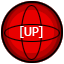
<style>
.page{position:relative;width:64px;height:64px;background:#ffffff}
.page>*{position:absolute;margin:0}
.t1{font:12px "Tahoma";color:#ffffff}
</style>
<div class="page">
<p class="t1" style="left:20px;top:26px;width:23px;height:12px">[UP]</p>
</div>
